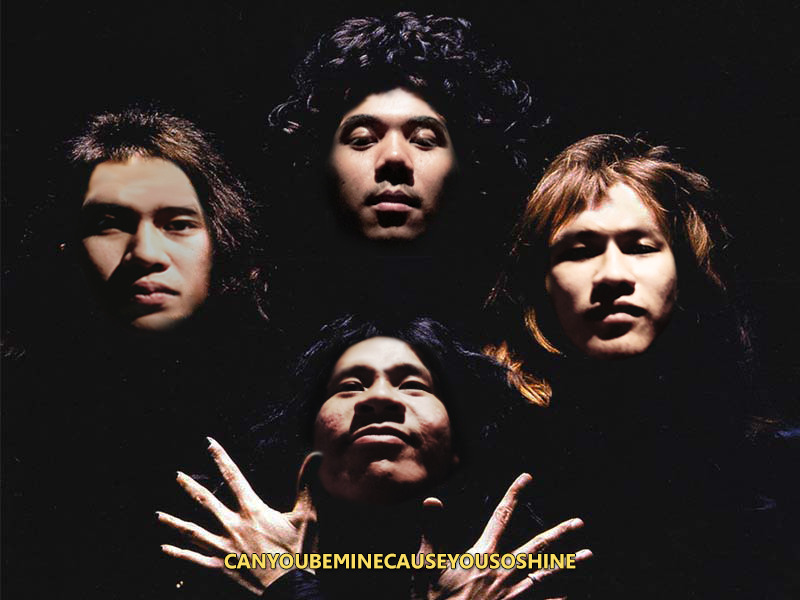
<style>
.page{position:relative;width:800px;height:600px;background:#121212}
.page>*{position:absolute;margin:0}
.t1{font:20.3px "Leelawadee-Bold";color:#f9de63;text-transform:uppercase}
</style>
<div class="page">
<p class="t1" style="left:224px;top:553px;width:352px;height:16px">CANYOUBEMINECaUSEYOUSOSHINE</p>
</div>
